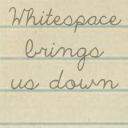
<style>
.page{position:relative;width:128px;height:128px}
.page>*{position:absolute;margin:0}
.t1{font:22.6px/32px "TheOnlyException";color:#8c8673}
.t2{font:22.1px/32px "TheOnlyException";color:#8c8673}
</style>
<div class="page">
<p class="t1" style="left:8px;top:7px;width:114px;height:83px;text-align:center"><span class="t2">Whitespace</span> brings us down</p>
</div>
